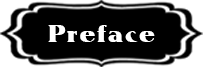
<style>
.page{position:relative;width:203px;height:67px;background:#000000}
.page>*{position:absolute;margin:0}
.t1{font:24px "Notram";letter-spacing:0.1em;color:#ffffff}
</style>
<div class="page">
<p class="t1" style="left:48px;top:25px;width:107px;height:17px">Preface</p>
</div>
